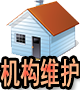
<style>
.page{position:relative;width:80px;height:90px}
.page>*{position:absolute;margin:0}
.t1{font:30.2px "SimHei";text-transform:uppercase;font-weight:bold;scale:0.64 1}
</style>
<div class="page">
<p class="t1" style="left:1px;top:58px;width:78px;height:29px">机构维护</p>
</div>
